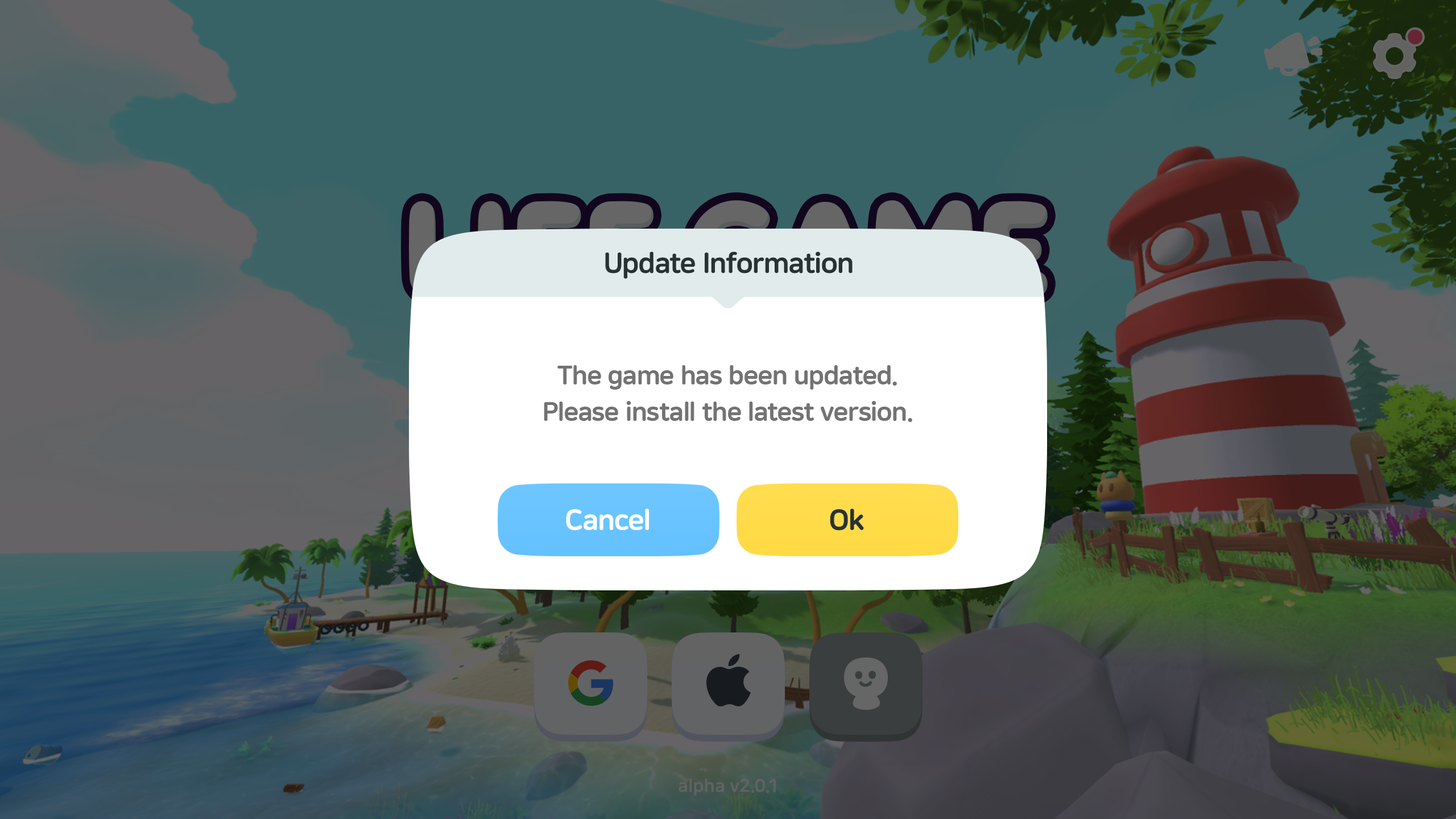
<style>
.page{position:relative;width:1456px;height:819px}
.page>*{position:absolute;margin:0}
.t1{font:28.4px "NanumSquareRoundEB";letter-spacing:-0.02em;color:#283233}
.t2{font:26.2px/36.4px "NanumSquareRoundEB";letter-spacing:-0.02em;color:#737373}
.t3{font:28.4px "NanumSquareRoundEB";letter-spacing:-0.025em;color:#ffffff}
.t4{font:28.4px "NanumSquareRoundEB";letter-spacing:-0.025em;color:#283233}
</style>
<div class="page">
<p class="t1" style="left:605px;top:251px;width:248px;height:28px">Update Information</p>
<p class="t2" style="left:544px;top:365px;width:368px;height:57px;text-align:center">The game has been updated.<br>Please install the latest version.</p>
<p class="t3" style="left:566px;top:508px;width:83px;height:23px">Cancel</p>
<p class="t4" style="left:830px;top:508px;width:34px;height:23px">Ok</p>
</div>
